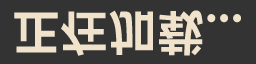
<style>
.page{position:relative;width:256px;height:64px;background:#333333}
.page>*{position:absolute;margin:0}
.t1{font:48px "HarmonyOS_Sans_SC_Bold";letter-spacing:0.005em;color:#f1e3cb}
</style>
<div class="page">
<p class="t1" style="left:14px;top:10px;width:227px;height:46px">正在加载...</p>
</div>
